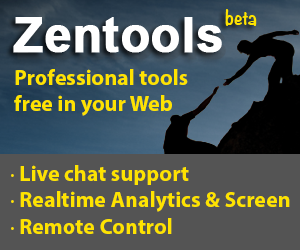
<style>
.page{position:relative;width:300px;height:250px;background:#545454}
.page>*{position:absolute;margin:0}
.t1{font:22px "MyriadPro-Bold";color:#fee300}
.t2{font:22px "MyriadPro-Regular";color:#fee300}
</style>
<div class="page">
<p class="t1" style="left:14px;top:69px;width:174px;height:47px">Professional tools<br>free in your Web</p>
<p class="t1" style="left:11px;top:165px;width:279px;height:69px"><span class="t2">· </span>Live chat support<br><span class="t2">· </span>Realtime Analytics &amp; Screen<br><span class="t2">· </span>Remote Control</p>
</div>
